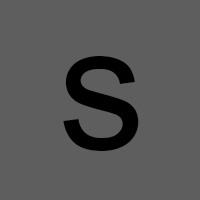
<style>
.page{position:relative;width:200px;height:200px;background:#5e5e5e}
.page>*{position:absolute;margin:0}
.t1{font:174.2px "ArialMT";color:#000000}
</style>
<div class="page">
<p class="t1" style="left:63px;top:56px;width:76px;height:95px">s</p>
</div>
